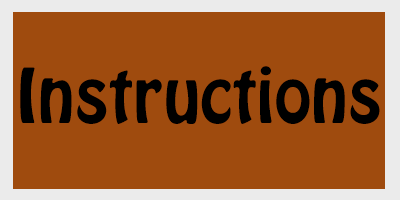
<style>
.page{position:relative;width:400px;height:200px;background:#9f4b0e}
.page>*{position:absolute;margin:0}
.t1{font:66.7px "HoboStd";color:#000000}
</style>
<div class="page">
<p class="t1" style="left:20px;top:66px;width:360px;height:58px">Instructions</p>
</div>
